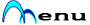
<style>
.page{position:relative;width:90px;height:25px;background:#ffffff}
.page>*{position:absolute;margin:0}
.t1{font:14.8px "WCADDENDUMBtalight";color:#000000;font-weight:bold;scale:1.95 1}
</style>
<div class="page">
<p class="t1" style="left:38px;top:13px;width:49px;height:8px">enu</p>
</div>
